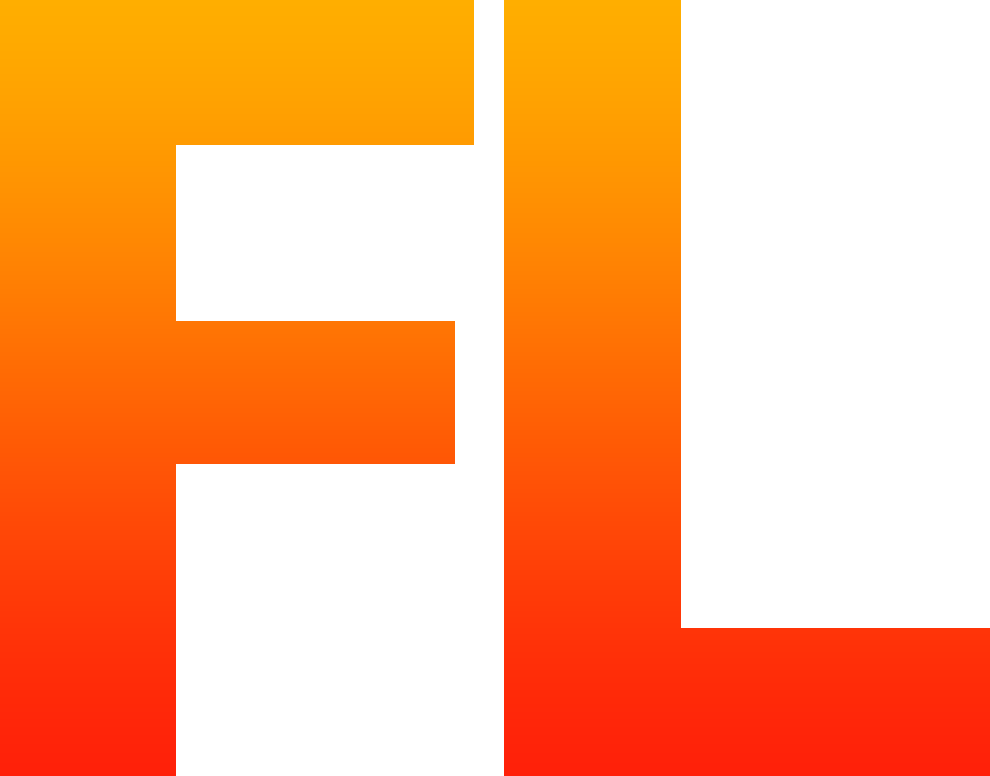
<style>
.page{position:relative;width:990px;height:776px;background:#ffffff}
.page>*{position:absolute;margin:0}
.t1{font:1150.5px "MyriadPro-Bold";letter-spacing:-0.075em;text-transform:uppercase}
</style>
<div class="page">
<p class="t1" style="left:0px;top:0px;width:990px;height:776px">fl</p>
</div>
